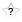
<style>
.page{position:relative;width:22px;height:22px;background:#ffffff}
.page>*{position:absolute;margin:0}
.t1{font:10px "ArialMT";color:#000000}
</style>
<div class="page">
<p class="t1" style="left:8px;top:8px;width:6px;height:7px">?</p>
</div>
